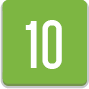
<style>
.page{position:relative;width:89px;height:89px;background:#7db642}
.page>*{position:absolute;margin:0}
.t1{font:60px "LibelSuitRg-Regular";color:#ffffff}
</style>
<div class="page">
<p class="t1" style="left:25px;top:20px;width:37px;height:49px">10</p>
</div>
